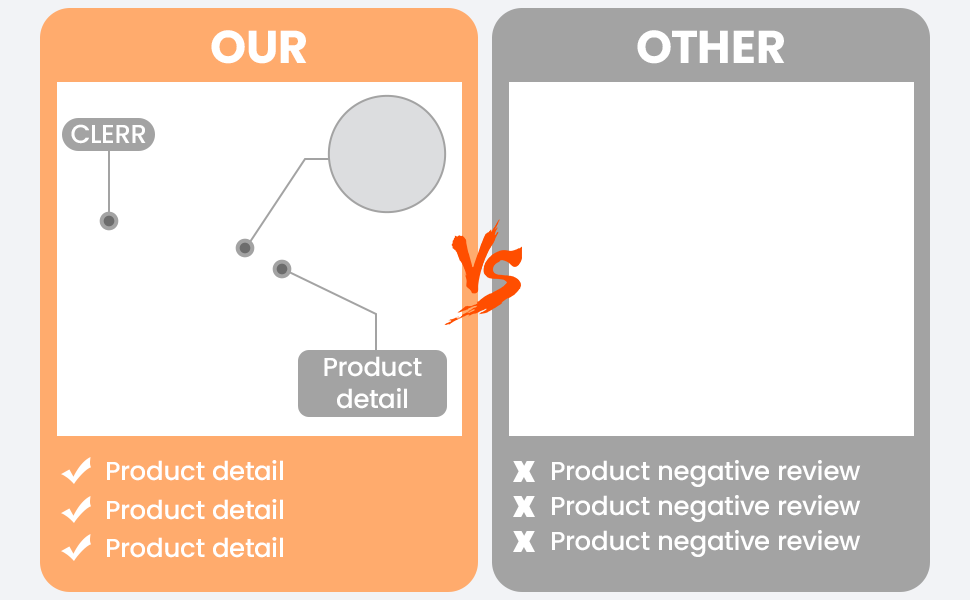
<style>
.page{position:relative;width:970px;height:600px;background:#ffffff}
.page>*{position:absolute;margin:0}
.t1{font:46px "Poppins-Bold";color:#ffffff}
.t2{font:26px "Poppins-Medium";color:#ffffff}
</style>
<div class="page">
<p class="t1" style="left:211px;top:30px;width:96px;height:34px">OUR</p>
<p class="t1" style="left:637px;top:30px;width:148px;height:34px">OTHER</p>
<p class="t2" style="left:71px;top:124px;width:75px;height:20px">CLERR</p>
<p class="t2" style="left:324px;top:356px;width:98px;height:53px;text-align:center">Product<br>detail</p>
<p class="t2" style="left:107px;top:460px;width:176px;height:21px">Product detail</p>
<p class="t2" style="left:552px;top:460px;width:309px;height:27px">Product negative review</p>
<p class="t2" style="left:552px;top:495px;width:309px;height:27px">Product negative review</p>
<p class="t2" style="left:107px;top:499px;width:176px;height:21px">Product detail</p>
<p class="t2" style="left:552px;top:530px;width:309px;height:27px">Product negative review</p>
<p class="t2" style="left:107px;top:537px;width:176px;height:21px">Product detail</p>
</div>
